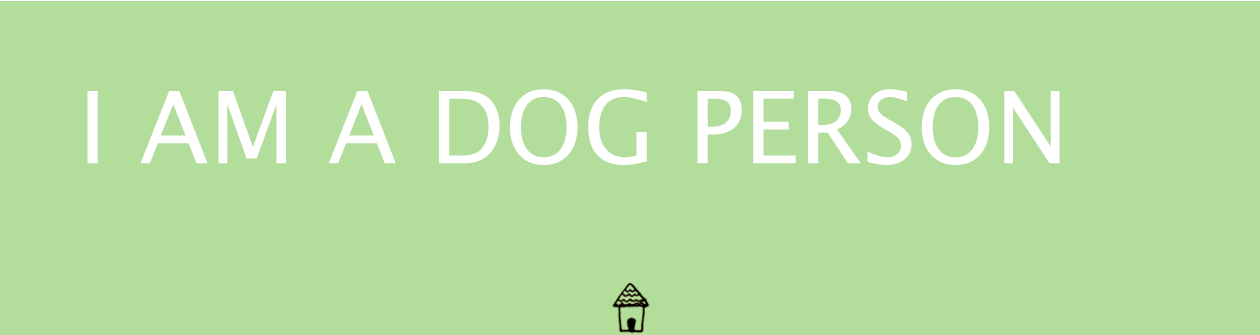
<style>
.page{position:relative;width:1260px;height:335px;background:#b2dd9b}
.page>*{position:absolute;margin:0}
.t1{font:100px "LucidaSansUnicode";letter-spacing:0.005em;color:#ffffff}
</style>
<div class="page">
<p class="t1" style="left:87px;top:89px;width:973px;height:76px">I AM A DOG PERSON</p>
</div>
